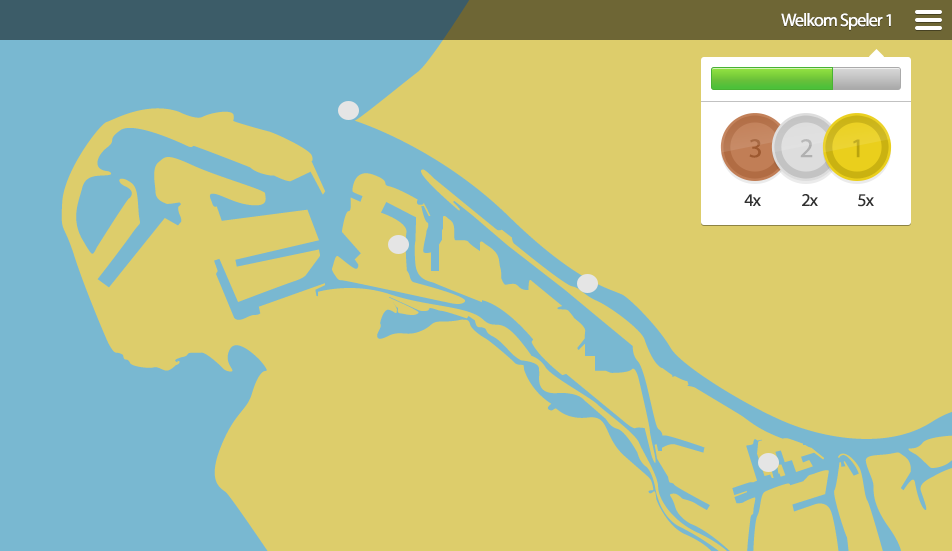
<style>
.page{position:relative;width:952px;height:551px;background:#ddcd6b}
.page>*{position:absolute;margin:0}
.t1{font:18px "MyriadPro-Regular";letter-spacing:-0.05em;color:#ffffff}
.t2{font:27.2px "MyriadPro-Regular";letter-spacing:-0.05em;color:#9d5930}
.t3{font:27.2px "MyriadPro-Regular";letter-spacing:-0.05em;color:#b0b0b0}
.t4{font:27.2px "MyriadPro-Regular";letter-spacing:-0.05em;color:#baa40d}
.t5{font:18px "MyriadPro-Regular";letter-spacing:-0.05em;color:#313131}
</style>
<div class="page">
<p class="t1" style="left:781px;top:13px;width:110px;height:17px">Welkom Speler 1</p>
<p class="t2" style="left:749px;top:139px;width:12px;height:19px">3</p>
<p class="t3" style="left:800px;top:139px;width:13px;height:19px">2</p>
<p class="t4" style="left:853px;top:139px;width:7px;height:19px">1</p>
<p class="t5" style="left:744px;top:194px;width:17px;height:12px">4x</p>
<p class="t5" style="left:802px;top:194px;width:16px;height:12px">2x</p>
<p class="t5" style="left:858px;top:194px;width:16px;height:13px">5x</p>
</div>
